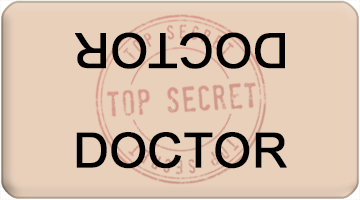
<style>
.page{position:relative;width:360px;height:200px;background:#e8d0bb}
.page>*{position:absolute;margin:0}
.t1{font:48px "ArialMT";color:#000000;font-weight:bold}
</style>
<div class="page">
<p class="t1" style="left:75px;top:32px;width:210px;height:37px;rotate:180deg">DOCTOR</p>
<p class="t1" style="left:76px;top:132px;width:211px;height:37px">DOCTOR</p>
</div>
